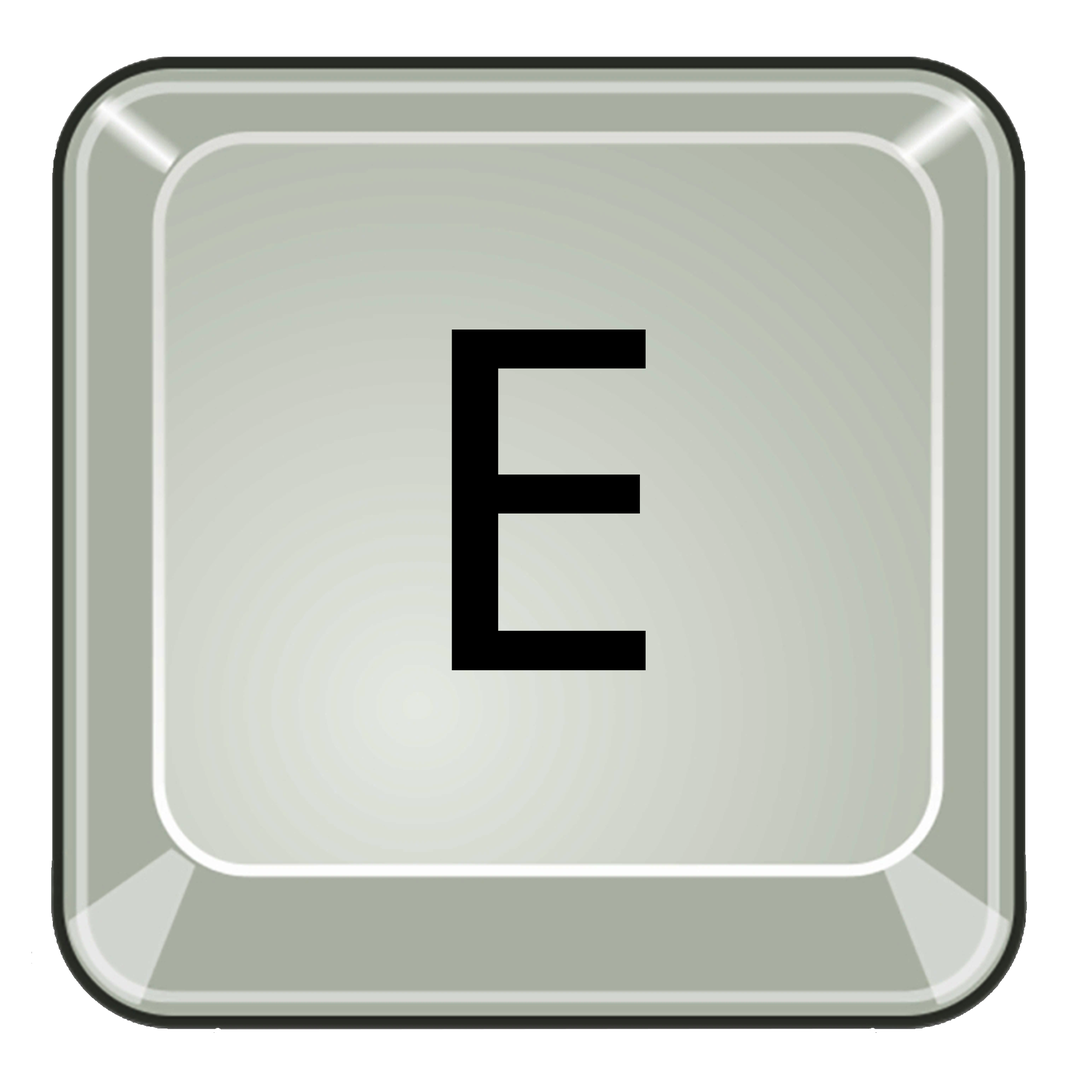
<style>
.page{position:relative;width:1092px;height:1092px;background:#ffffff}
.page>*{position:absolute;margin:0}
.t1{font:534px "Consolas";color:#000000}
</style>
<div class="page">
<p class="t1" style="left:452px;top:330px;width:194px;height:340px">E</p>
</div>
